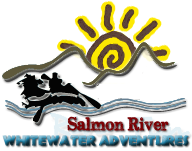
<style>
.page{position:relative;width:192px;height:151px;background:#ffffff}
.page>*{position:absolute;margin:0}
.t1{font:18px "SubwayNovella";color:#7b0003}
.t2{font:12px "NorthernTerritories";letter-spacing:-0.02em}
.t3{font:12px "NorthernTerritories";letter-spacing:0.04em}
</style>
<div class="page">
<p class="t1" style="left:67px;top:116px;width:102px;height:15px">Salmon River</p>
<p class="t2" style="left:2px;top:135px;width:187px;height:11px"><span class="t3">W</span>hitewater Adventures</p>
</div>
